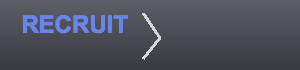
<style>
.page{position:relative;width:300px;height:70px}
.page>*{position:absolute;margin:0}
.t1{font:24px "Arial-BoldMT";color:#6a85e9}
</style>
<div class="page">
<p class="t1" style="left:22px;top:14px;width:106px;height:20px">RECRUIT</p>
</div>
